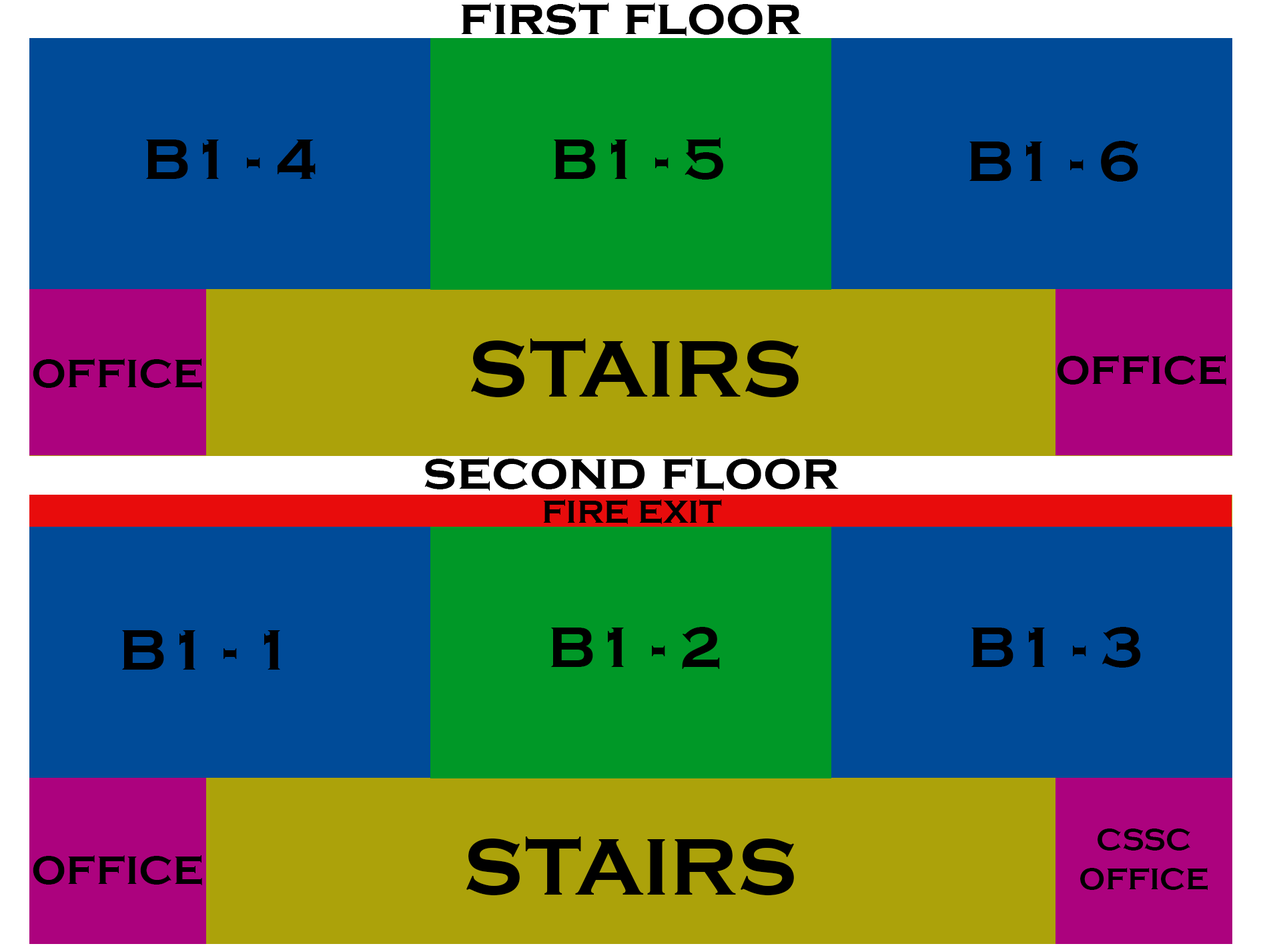
<style>
.page{position:relative;width:1261px;height:946px;background:#004b98}
.page>*{position:absolute;margin:0}
.t1{font:54.3px "CopperplateGothic-Bold";color:#000000}
.t2{font:59px "CopperplateGothic-Bold";color:#000000}
.t3{font:83.4px "CopperplateGothic-Bold";color:#000000}
.t4{font:40.7px "CopperplateGothic-Bold";color:#000000}
.t5{font:33.4px "CopperplateGothic-Bold";color:#000000}
.t6{font:30.6px/39.4px "CopperplateGothic-Bold";color:#000000}
</style>
<div class="page">
<p class="t1" style="left:461px;top:3px;width:340px;height:33px">first floor</p>
<p class="t2" style="left:554px;top:137px;width:169px;height:42px">B1 - 5</p>
<p class="t2" style="left:146px;top:139px;width:170px;height:40px">B1 - 4</p>
<p class="t2" style="left:970px;top:141px;width:168px;height:40px">B1 - 6</p>
<p class="t3" style="left:470px;top:338px;width:329px;height:59px">STAIRS</p>
<p class="t4" style="left:33px;top:358px;width:169px;height:30px">OFFICE</p>
<p class="t4" style="left:1057px;top:355px;width:169px;height:30px">OFFICE</p>
<p class="t1" style="left:424px;top:457px;width:415px;height:33px">second floor</p>
<p class="t5" style="left:544px;top:499px;width:178px;height:25px">FIRE EXIT</p>
<p class="t2" style="left:122px;top:630px;width:158px;height:39px">B1 - 1</p>
<p class="t2" style="left:551px;top:627px;width:169px;height:42px">B1 - 2</p>
<p class="t2" style="left:972px;top:627px;width:169px;height:40px">B1 - 3</p>
<p class="t6" style="left:1080px;top:828px;width:128px;height:61px;text-align:center">CSSC<br>OFFICE</p>
<p class="t3" style="left:466px;top:836px;width:329px;height:59px">STAIRS</p>
<p class="t4" style="left:33px;top:855px;width:169px;height:30px">OFFICE</p>
</div>
